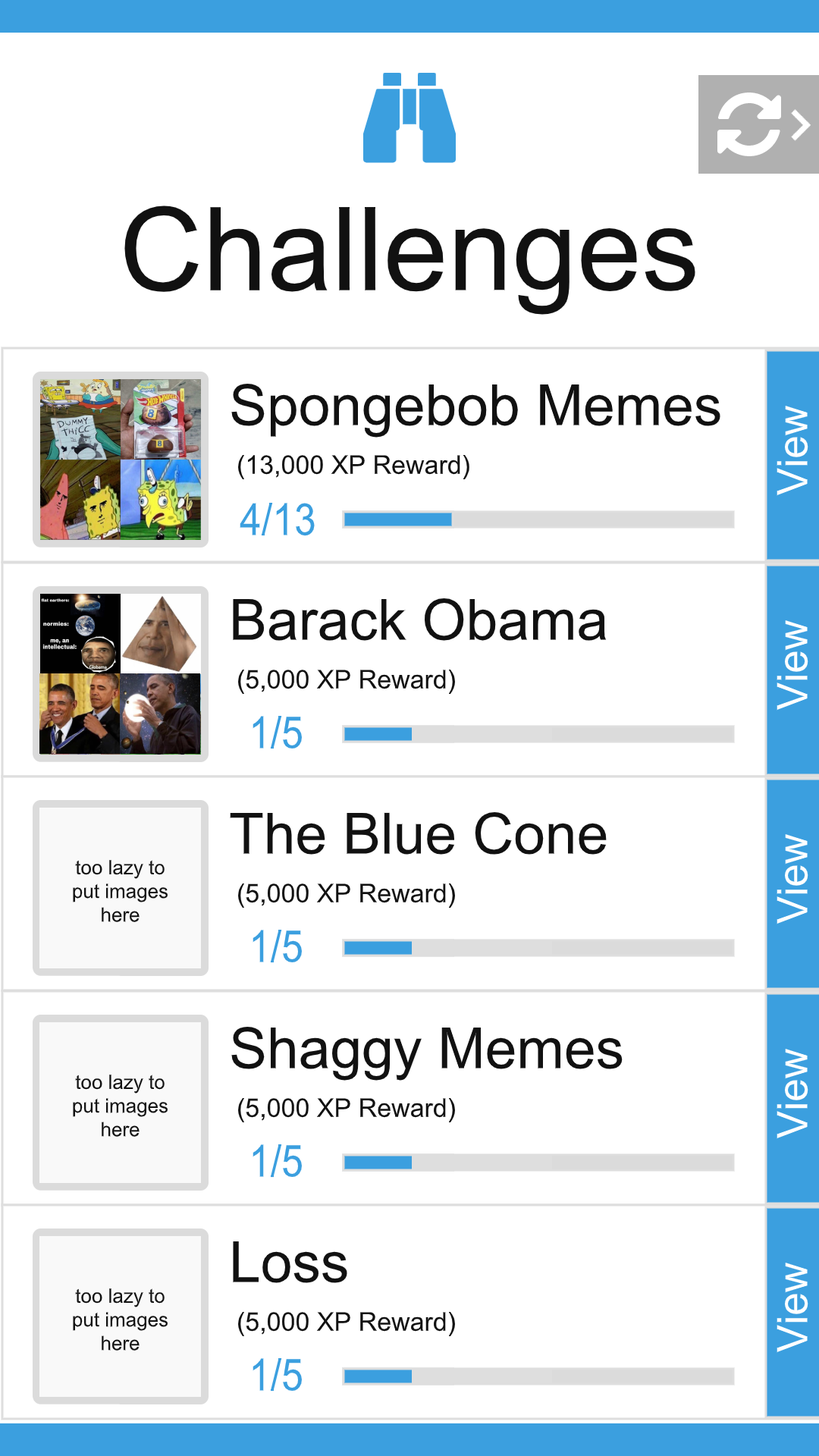
<style>
.page{position:relative;width:819px;height:1456px;background:#ffffff}
.page>*{position:absolute;margin:0}
.t1{font:116px "ArialMT";color:#111111}
.t2{font:56.9px "ArialMT";color:#111111}
.t3{font:25.8px "ArialMT";color:#111111}
.t4{font:44.2px "ArialMT";color:#3b9fdf;scale:0.89 1}
.t5{font:19.7px "ArialMT";color:#111111}
</style>
<div class="page">
<p class="t1" style="left:124px;top:206px;width:571px;height:109px">Challenges</p>
<p class="t2" style="left:231px;top:384px;width:489px;height:54px">Spongebob Memes</p>
<p class="t3" style="left:238px;top:455px;width:231px;height:24px">(13,000 XP Reward)</p>
<p class="t4" style="left:240px;top:502px;width:75px;height:34px">4/13</p>
<p class="t2" style="left:233px;top:598px;width:374px;height:43px">Barack Obama</p>
<p class="t3" style="left:238px;top:670px;width:217px;height:24px">(5,000 XP Reward)</p>
<p class="t4" style="left:253px;top:716px;width:49px;height:33px">1/5</p>
<p class="t2" style="left:230px;top:812px;width:377px;height:43px">The Blue Cone</p>
<p class="t5" style="left:73px;top:860px;width:95px;height:62px;text-align:center">too lazy to put images here</p>
<p class="t3" style="left:238px;top:883px;width:217px;height:25px">(5,000 XP Reward)</p>
<p class="t4" style="left:253px;top:930px;width:49px;height:33px">1/5</p>
<p class="t2" style="left:231px;top:1027px;width:392px;height:54px">Shaggy Memes</p>
<p class="t5" style="left:73px;top:1075px;width:95px;height:62px;text-align:center">too lazy to put images here</p>
<p class="t3" style="left:238px;top:1098px;width:217px;height:24px">(5,000 XP Reward)</p>
<p class="t4" style="left:253px;top:1144px;width:49px;height:34px">1/5</p>
<p class="t2" style="left:233px;top:1241px;width:114px;height:42px">Loss</p>
<p class="t5" style="left:73px;top:1288px;width:95px;height:63px;text-align:center">too lazy to put images here</p>
<p class="t3" style="left:238px;top:1312px;width:217px;height:24px">(5,000 XP Reward)</p>
<p class="t4" style="left:253px;top:1358px;width:49px;height:34px">1/5</p>
</div>
